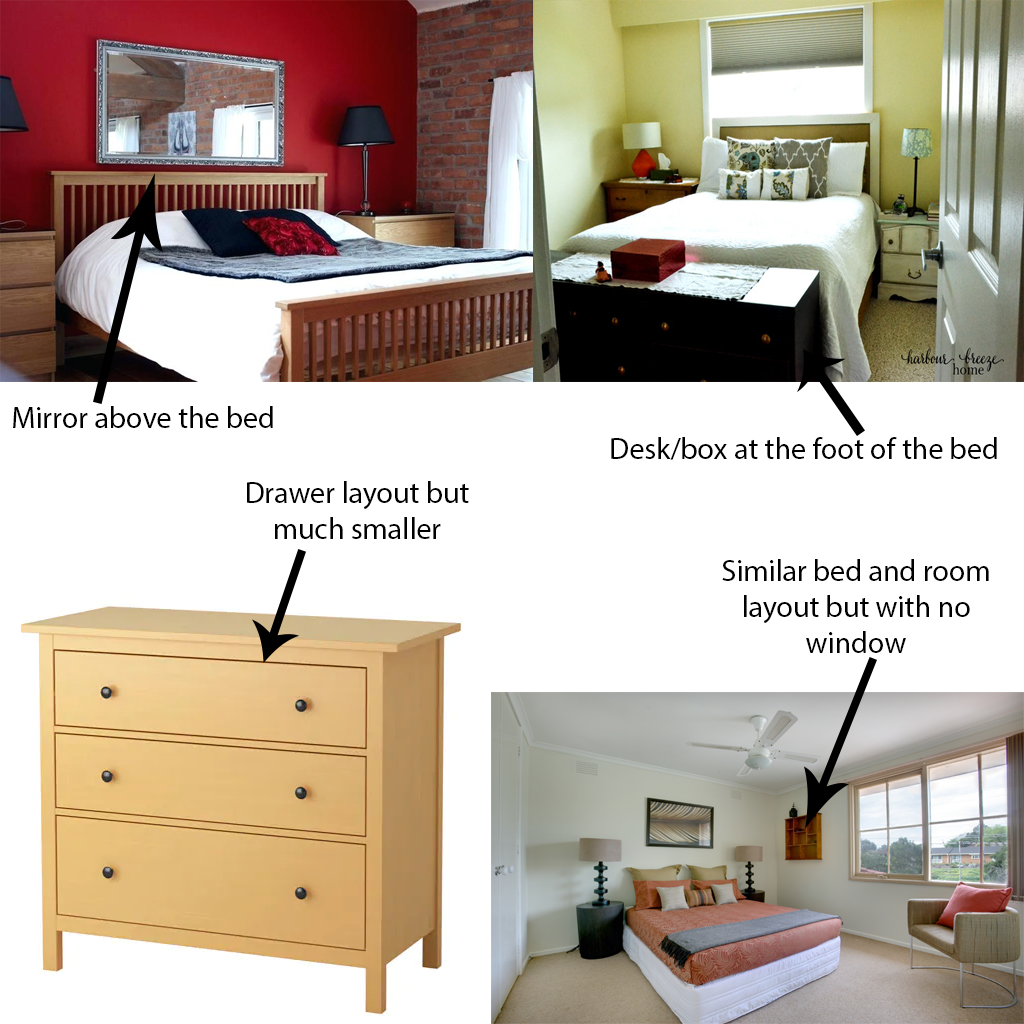
<style>
.page{position:relative;width:1024px;height:1024px;background:#ffffff}
.page>*{position:absolute;margin:0}
.t1{font:30px "MyriadPro-Regular";color:#000000}
</style>
<div class="page">
<p class="t1" style="left:13px;top:406px;width:260px;height:22px">Mirror above the bed</p>
<p class="t1" style="left:611px;top:437px;width:386px;height:23px">Desk/box at the foot of the bed</p>
<p class="t1" style="left:247px;top:481px;width:222px;height:58px;text-align:center">Drawer layout but much smaller</p>
<p class="t1" style="left:722px;top:559px;width:267px;height:94px;text-align:center">Similar bed and room layout but with no window</p>
</div>
